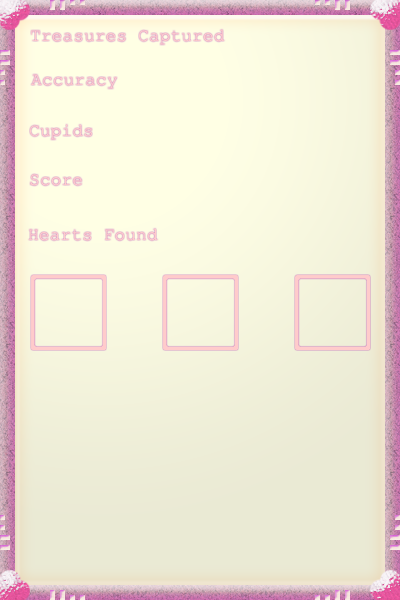
<style>
.page{position:relative;width:400px;height:600px}
.page>*{position:absolute;margin:0}
.t1{font:18px "CourierNewPSMT";color:#ffffff}
</style>
<div class="page">
<p class="t1" style="left:31px;top:29px;width:194px;height:16px">Treasures Captured</p>
<p class="t1" style="left:31px;top:74px;width:86px;height:15px">Accuracy</p>
<p class="t1" style="left:30px;top:124px;width:62px;height:16px">Cupids</p>
<p class="t1" style="left:30px;top:174px;width:52px;height:12px">Score</p>
<p class="t1" style="left:28px;top:228px;width:130px;height:13px">Hearts Found</p>
</div>
